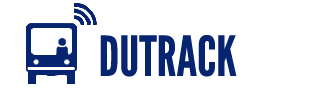
<style>
.page{position:relative;width:324px;height:90px;background:#ffffff}
.page>*{position:absolute;margin:0}
.t1{font:55px "LeagueGothic";color:#06246f}
</style>
<div class="page">
<p class="t1" style="left:100px;top:35px;width:137px;height:42px">DUTRACK</p>
</div>
